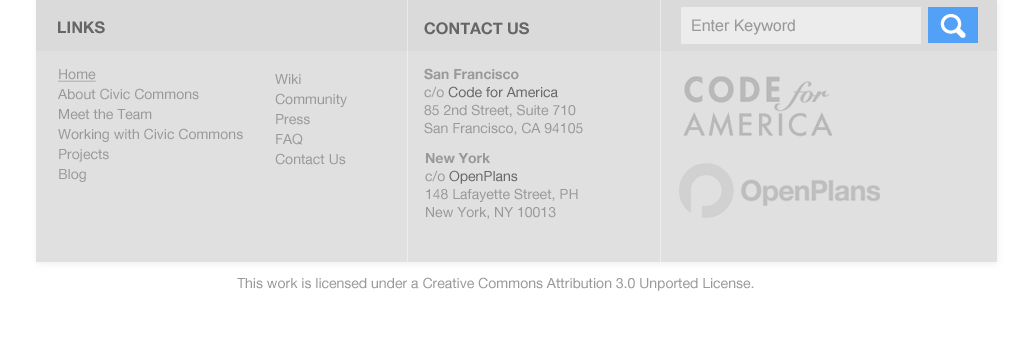
<style>
.page{position:relative;width:1024px;height:350px;background:#e0e0e0}
.page>*{position:absolute;margin:0}
.t1{font:16px "HelveticaNeue-Bold";color:#666666}
.t2{font:16px "ArialMT";color:#999999}
.t3{font:14px/20px "HelveticaNeue";color:#999999}
.t4{font:14px/20px "HelveticaNeue";color:#999999;text-decoration:underline}
.t5{font:14px/20px "HelveticaNeue";color:#666666}
.t6{font:14px/18px "HelveticaNeue";color:#999999}
.t7{font:14px/18px "HelveticaNeue-Bold";color:#999999}
.t8{font:14px/18px "HelveticaNeue";color:#686868}
.t9{font:14px "HelveticaNeue";color:#999999}
</style>
<div class="page">
<p class="t1" style="left:58px;top:21px;width:47px;height:13px">LINKS</p>
<p class="t1" style="left:424px;top:22px;width:105px;height:13px">CONTACT US</p>
<p class="t2" style="left:692px;top:19px;width:103px;height:16px">Enter Keyword</p>
<p class="t3" style="left:58px;top:69px;width:185px;height:113px"><span class="t4">Home<br></span>About Civic Commons<br>Meet the Team<br>Working with Civic Commons<br>Projects<br>Blog<br><span class="t5"></span></p>
<p class="t3" style="left:275px;top:74px;width:72px;height:91px">Wiki<br>Community<br>Press<br>FAQ<br>Contact Us</p>
<p class="t6" style="left:424px;top:68px;width:159px;height:67px"><span class="t7">San Francisco<br></span>c/o <span class="t8">Code for America<br></span>85 2nd Street, Suite 710<br>San Francisco, CA 94105</p>
<p class="t6" style="left:425px;top:153px;width:153px;height:66px"><span class="t7">New York<br></span>c/o <span class="t8">OpenPlans<br></span>148 Lafayette Street, PH<br>New York, NY 10013</p>
<p class="t9" style="left:237px;top:277px;width:517px;height:14px">This work is licensed under a Creative Commons Attribution 3.0 Unported License.</p>
</div>
